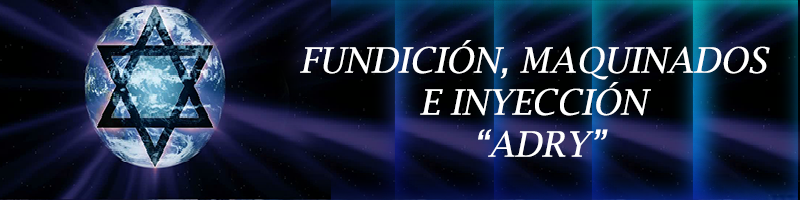
<style>
.page{position:relative;width:800px;height:200px}
.page>*{position:absolute;margin:0}
.t1{font:35px "LucidaBright-Italic";color:#ffffff}
</style>
<div class="page">
<p class="t1" style="left:300px;top:40px;width:470px;height:117px;text-align:center">FUNDICIÓN, MAQUINADOS <br>E INYECCIÓN <br>“ADRY”</p>
</div>
